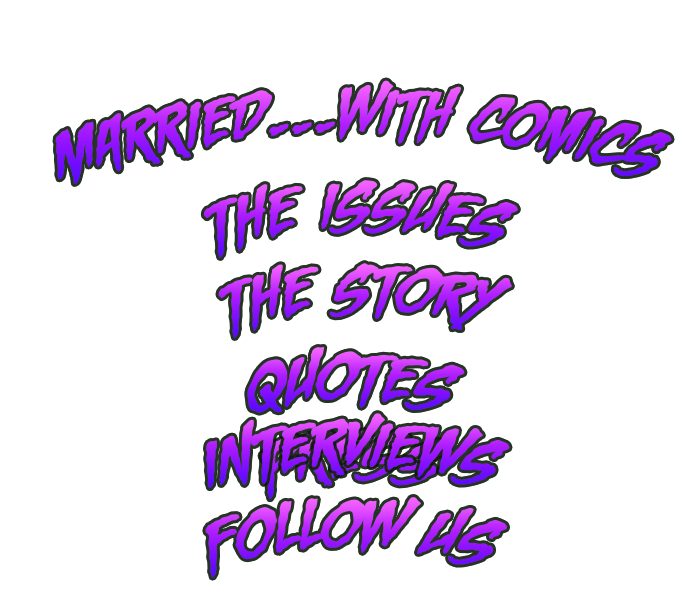
<style>
.page{position:relative;width:700px;height:600px;background:#ffffff}
.page>*{position:absolute;margin:0}
.t1{font:60.2px/55.4px "EntrailsBB-Italic";letter-spacing:0.04em}
.t2{font:60.2px/55.4px "EntrailsBB-Italic"}
.t3{font:60.2px "EntrailsBB-Italic";letter-spacing:0.04em}
</style>
<div class="page">
<p class="t1" style="left:55px;top:80px;width:617px;height:104px;text-align:center">Married<span class="t2">...</span>with comics</p>
<p class="t3" style="left:203px;top:180px;width:315px;height:78px">The Issues</p>
<p class="t3" style="left:218px;top:263px;width:294px;height:75px">The Story</p>
<p class="t3" style="left:247px;top:347px;width:218px;height:66px">Quotes</p>
<p class="t3" style="left:206px;top:413px;width:304px;height:76px">Interviews</p>
<p class="t3" style="left:260px;top:428px;width:191px;height:72px">Press</p>
<p class="t3" style="left:205px;top:497px;width:302px;height:81px">Follow Us</p>
</div>
